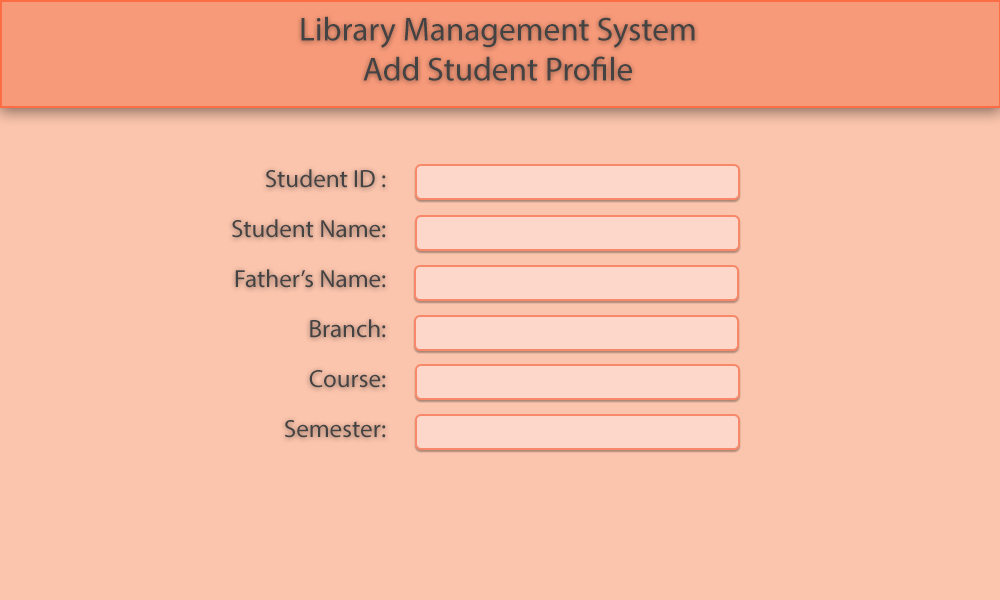
<style>
.page{position:relative;width:1000px;height:600px;background:#fbc4ac}
.page>*{position:absolute;margin:0}
.t1{font:33.3px "MyriadPro-Regular";color:#444343}
.t2{font:25px/50px "MyriadPro-Regular";color:#444343}
</style>
<div class="page">
<p class="t1" style="left:301px;top:16px;width:394px;height:65px;text-align:center">Library Management System<br>Add Student Profile</p>
<p class="t2" style="left:232px;top:169px;width:154px;height:269px;text-align:right">Student ID : <br>Student Name:<br>Father’s Name:<br>Branch:<br>Course:<br>Semester:</p>
</div>
